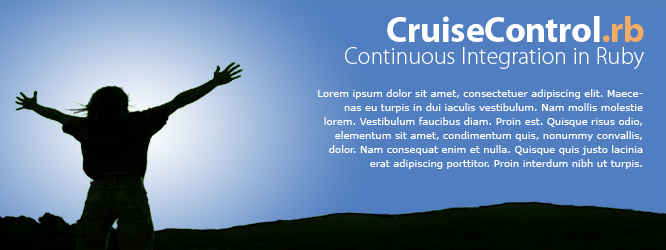
<style>
.page{position:relative;width:666px;height:250px;background:#507ec0}
.page>*{position:absolute;margin:0}
.t1{font:24px "MyriadPro-Light";color:#ffffff}
.t2{font:10px/14px "Verdana";color:#ffffff}
</style>
<div class="page">
<p class="t1" style="left:345px;top:47px;width:299px;height:22px">Continuous Integration in Ruby</p>
<p class="t2" style="left:318px;top:89px;width:325px;height:80px;text-align:right">Lorem ipsum dolor sit amet, consectetuer adipiscing elit. Maecenas eu turpis in dui iaculis vestibulum. Nam mollis molestie lorem. Vestibulum faucibus diam. Proin est. Quisque risus odio, elementum sit amet, condimentum quis, nonummy convallis, dolor. Nam consequat enim et nulla. Quisque quis justo lacinia erat adipiscing porttitor. Proin interdum nibh ut turpis.</p>
</div>
